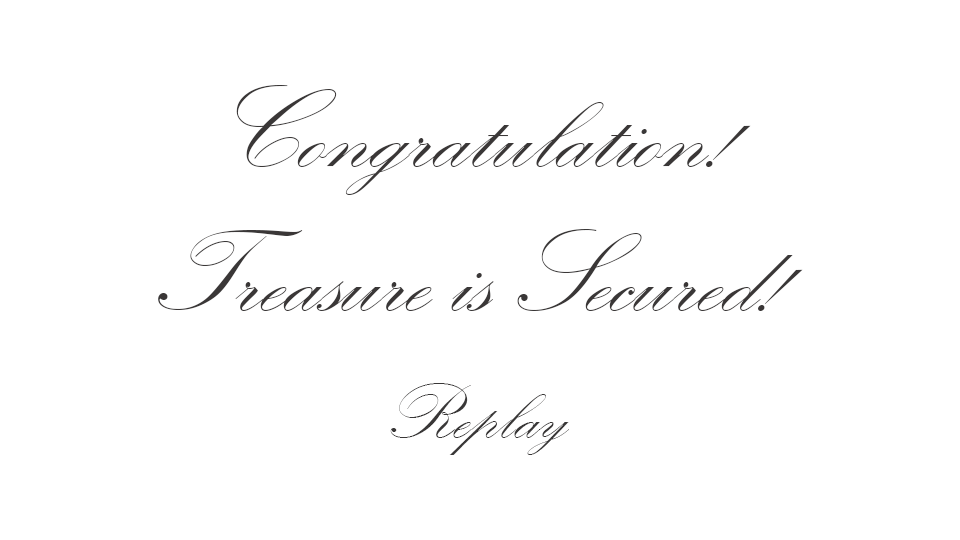
<style>
.page{position:relative;width:960px;height:540px;background:#ffffff}
.page>*{position:absolute;margin:0}
.t1{font:120px "KunstlerScript";color:#3a3737}
.t2{font:80px "KunstlerScript";color:#393737}
</style>
<div class="page">
<p class="t1" style="left:158px;top:85px;width:645px;height:226px;text-align:center">Congratulation!<br>Treasure is Secured!</p>
<p class="t2" style="left:390px;top:383px;width:179px;height:72px">Replay</p>
</div>
